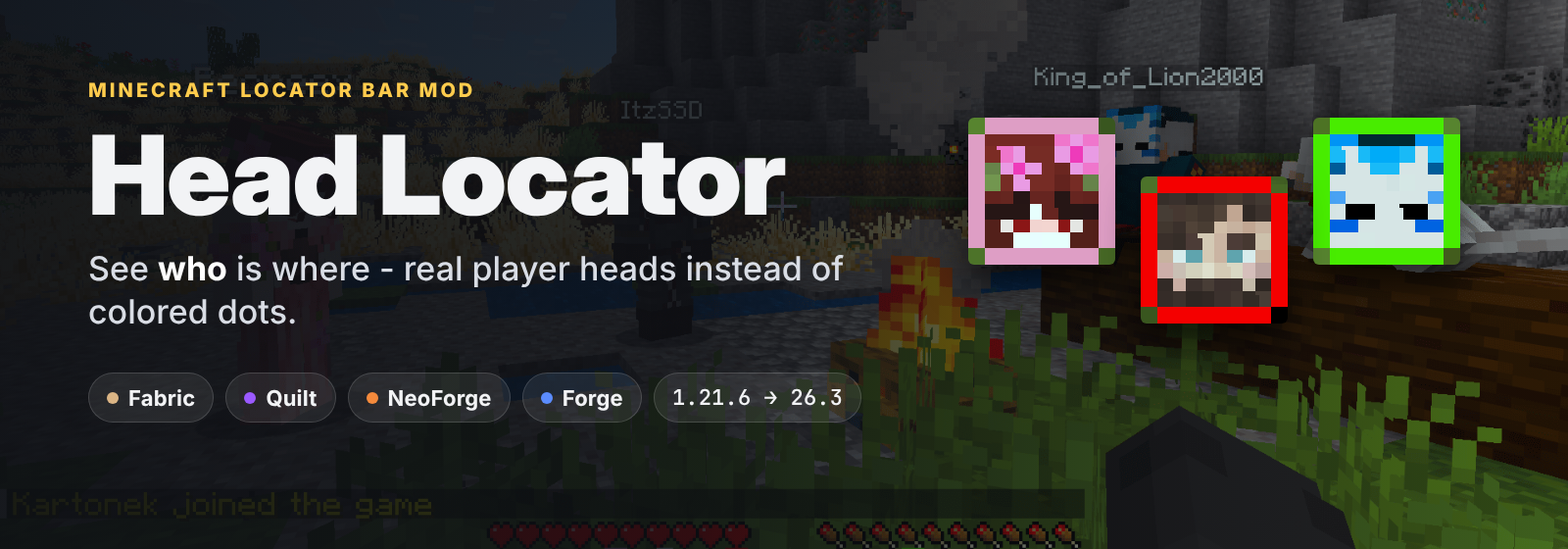
<style>
.page{position:relative;width:1568px;height:549px}
.page>*{position:absolute;margin:0}
.t1{font:19.6px "Inter-ExtraBold";letter-spacing:0.15em;color:#ffcc4d}
.t2{font:109.8px "InterDisplay-Black";letter-spacing:-0.013em;color:#f2f3f5}
.t3{font:33.3px/43.3px "Inter-Medium";color:#d9dde5}
.t4{font:33.3px/43.3px "Inter-Bold";color:#ffffff}
.t5{font:21.6px "Inter-Bold";letter-spacing:0.009em;color:#f2f3f5}
.t6{font:21.6px "JetBrainsMono-SemiBold";letter-spacing:0.009em;color:#f2f3f5}
</style>
<div class="page">
<p class="t1" style="left:89px;top:82px;width:383px;height:16px">MINECRAFT LOCATOR BAR MOD</p>
<p class="t2" style="left:92px;top:134px;width:694px;height:83px">Head Locator</p>
<p class="t3" style="left:89px;top:255px;width:755px;height:69px">See <span class="t4">who</span> is where - real player heads instead of<br>colored dots.</p>
<p class="t5" style="left:129px;top:389px;width:66px;height:18px">Fabric</p>
<p class="t5" style="left:267px;top:389px;width:50px;height:19px">Quilt</p>
<p class="t6" style="left:673px;top:388px;width:169px;height:18px">1.21.6 → 26.3</p>
<p class="t5" style="left:388px;top:390px;width:103px;height:21px">NeoForge</p>
<p class="t5" style="left:564px;top:390px;width:58px;height:21px">Forge</p>
</div>
